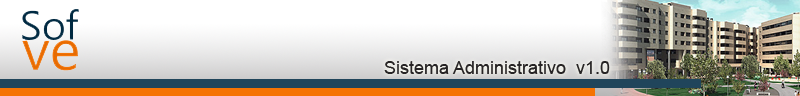
<style>
.page{position:relative;width:800px;height:96px}
.page>*{position:absolute;margin:0}
.t1{font:18px "ArialMT";color:#272425}
</style>
<div class="page">
<p class="t1" style="left:384px;top:61px;width:226px;height:13px">Sistema Administrativo  v1.0</p>
</div>
